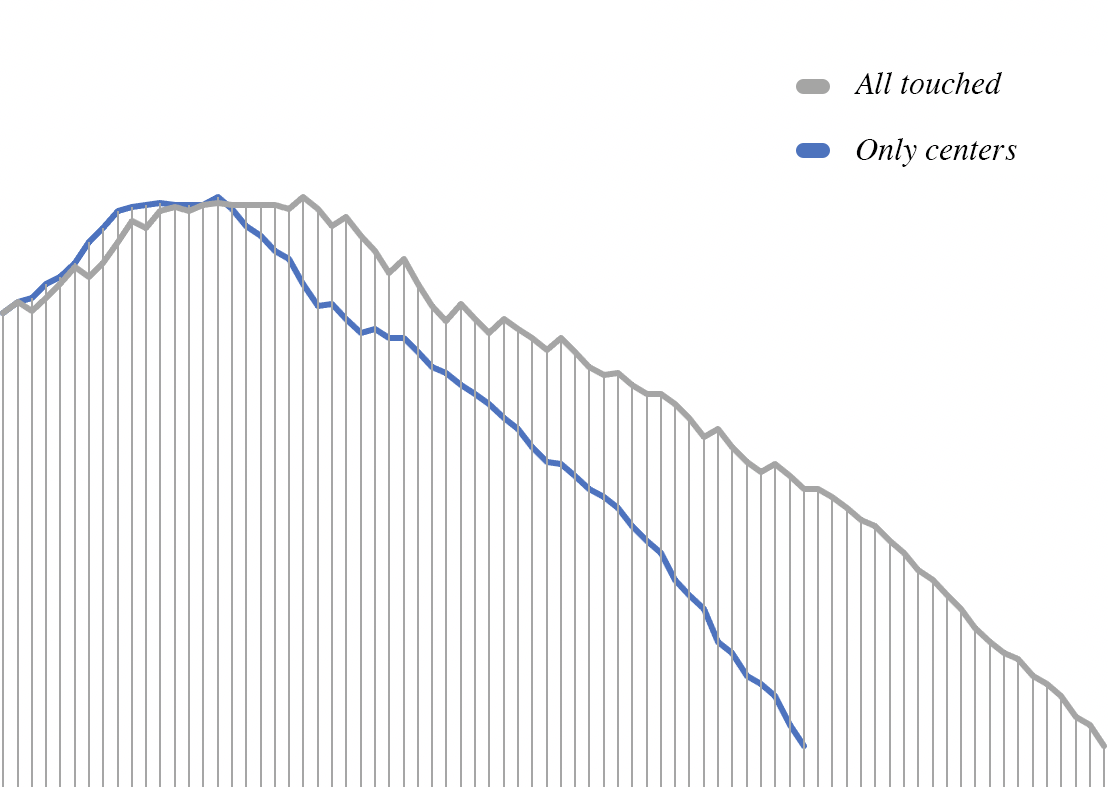
<style>
.page{position:relative;width:1108px;height:787px;background:#ffffff}
.page>*{position:absolute;margin:0}
.t1{font:32px "Times-Italic";color:#000000}
</style>
<div class="page">
<p class="t1" style="left:854px;top:72px;width:148px;height:22px">All touched</p>
<p class="t1" style="left:856px;top:138px;width:161px;height:29px">Only centers</p>
</div>
